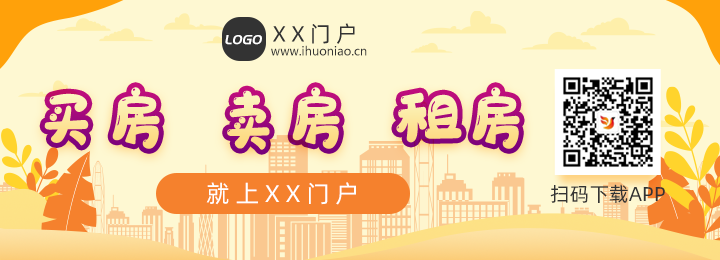
<style>
.page{position:relative;width:720px;height:260px;background:#fef8d2}
.page>*{position:absolute;margin:0}
.t1{font:22px "AlibabaPuHuiTi-Regular";letter-spacing:0.24em;color:#333333}
.t2{font:14px "PangMenZhengDao";color:#ffffff;text-transform:uppercase;font-style:italic}
.t3{font:12px "MicrosoftYaHei";color:#333333}
.t4{font:24px "AlibabaPuHuiTiR";letter-spacing:0.24em;color:#ffffff}
.t5{font:20px "AlibabaPuHuiTiR";color:#333333}
</style>
<div class="page">
<p class="t1" style="left:273px;top:23px;width:82px;height:21px">XX门户</p>
<p class="t2" style="left:225px;top:35px;width:37px;height:10px">logo</p>
<p class="t3" style="left:271px;top:45px;width:96px;height:11px">www.ihuoniao.cn</p>
<p class="t4" style="left:206px;top:182px;width:150px;height:23px">就上XX门户</p>
<p class="t5" style="left:550px;top:184px;width:115px;height:19px">扫码下载APP</p>
</div>
